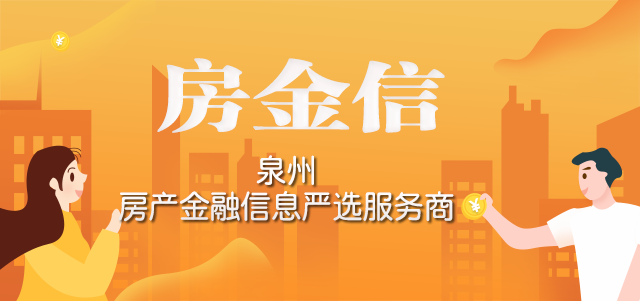
<style>
.page{position:relative;width:640px;height:301px}
.page>*{position:absolute;margin:0}
.t1{font:12.2px "TRENDS";color:#ffffff}
.t2{font:75.8px "FZCSJW--GB1-0";color:#ffffff;scale:1.28 1}
.t3{font:31.8px/36px "QingYuan";color:#ffffff;scale:0.96 1}
.t4{font:16.1px "TRENDS";color:#ffffff}
</style>
<div class="page">
<p class="t1" style="left:56px;top:34px;width:9px;height:12px;rotate:-161deg">￥</p>
<p class="t2" style="left:157px;top:58px;width:288px;height:75px">房金信</p>
<p class="t3" style="left:118px;top:155px;width:336px;height:67px;text-align:center">泉州<br>房产金融信息严选服务商</p>
<p class="t4" style="left:468px;top:198px;width:13px;height:15px;rotate:-19deg">￥</p>
</div>
